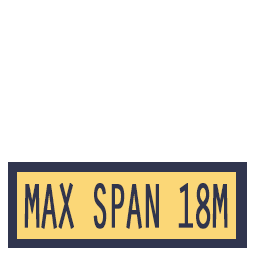
<style>
.page{position:relative;width:256px;height:256px;background:#ffffff}
.page>*{position:absolute;margin:0}
.t1{font:64px "OratorStd";letter-spacing:-0.14em;color:#30354d;font-weight:bold;scale:0.55 1}
</style>
<div class="page">
<p class="t1" style="left:24px;top:183px;width:204px;height:46px">MAX SPAN 18M</p>
</div>
